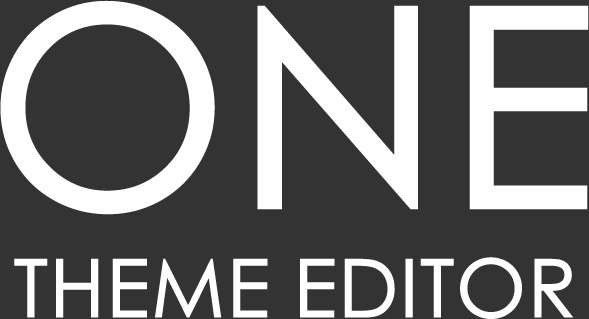
<style>
.page{position:relative;width:589px;height:319px;background:#333333}
.page>*{position:absolute;margin:0}
.t1{font:277.5px "STHeitiSC-Medium";letter-spacing:0.025em;color:#ffffff}
.t2{font:80px "STHeitiSC-Medium";letter-spacing:0.025em;color:#ffffff}
</style>
<div class="page">
<p class="t1" style="left:0px;top:0px;width:589px;height:215px">ONE</p>
<p class="t2" style="left:14px;top:257px;width:560px;height:62px">THEME EDITOR</p>
</div>
